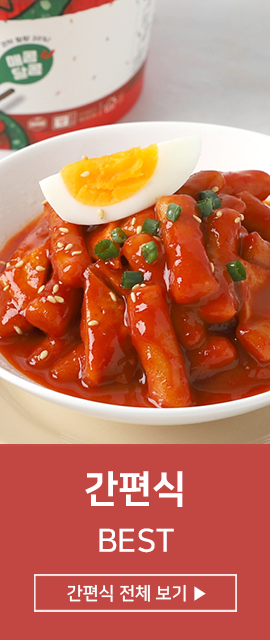
<style>
.page{position:relative;width:270px;height:640px;background:#c24641}
.page>*{position:absolute;margin:0}
.t1{font:38px "NanumSquareEB";color:#ffffff}
.t2{font:32px "NanumSquareB";color:#ffffff}
.t3{font:18px "NanumSquareB";color:#ffffff}
</style>
<div class="page">
<p class="t1" style="left:85px;top:471px;width:98px;height:36px">간편식</p>
<p class="t2" style="left:99px;top:528px;width:75px;height:25px">BEST</p>
<p class="t3" style="left:67px;top:584px;width:139px;height:18px">간편식 전체 보기 ▶</p>
</div>
